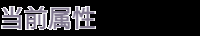
<style>
.page{position:relative;width:200px;height:36px;background:#000000}
.page>*{position:absolute;margin:0}
.t1{font:24px "WebPSD-18463539-0-Regular";color:#837a91;font-weight:bold}
</style>
<div class="page">
<p class="t1" style="left:0px;top:0px;width:200px;height:36px">当前属性</p>
</div>
